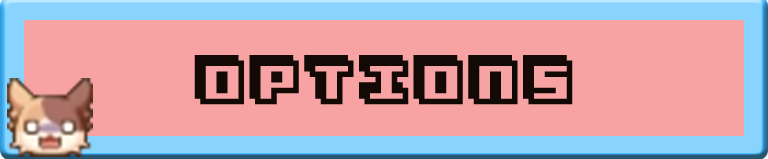
<style>
.page{position:relative;width:768px;height:159px;background:#f7a3a3}
.page>*{position:absolute;margin:0}
.t1{font:87.5px "3Dventure";color:#130a06}
</style>
<div class="page">
<p class="t1" style="left:194px;top:55px;width:379px;height:50px">Options</p>
</div>
